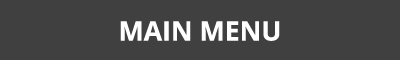
<style>
.page{position:relative;width:400px;height:60px;background:#404040}
.page>*{position:absolute;margin:0}
.t1{font:26.7px "OpenSans-Bold";color:#ffffff}
</style>
<div class="page">
<p class="t1" style="left:120px;top:21px;width:160px;height:20px">MAIN MENU</p>
</div>
